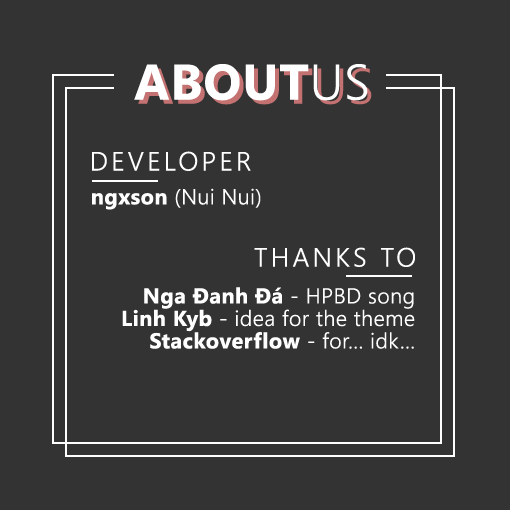
<style>
.page{position:relative;width:510px;height:510px;background:#333333}
.page>*{position:absolute;margin:0}
.t1{font:50px "SegoeUI-Bold";letter-spacing:0.02em;color:#ffffff}
.t2{font:50px "SegoeUI-Semilight";letter-spacing:0.02em;color:#ffffff}
.t3{font:50px "SegoeUI-Bold";letter-spacing:0.02em}
.t4{font:50px "SegoeUI-Semilight";letter-spacing:0.02em}
.t5{font:26.4px "SegoeUI-Semilight";letter-spacing:0.12em;color:#ffffff}
.t6{font:21.6px "SegoeUI-Semilight";letter-spacing:0.02em;color:#ffffff}
.t7{font:21.6px "SegoeUI-Bold";letter-spacing:0.02em;color:#ffffff}
.t8{font:26.5px "SegoeUI-Semilight";letter-spacing:0.12em;color:#ffffff}
.t9{font:21.7px/22.5px "SegoeUI-Semilight";letter-spacing:0.02em;color:#ffffff}
.t10{font:21.7px/22.5px "SegoeUI-Bold";letter-spacing:0.02em;color:#ffffff}
</style>
<div class="page">
<p class="t1" style="left:134px;top:64px;width:234px;height:37px">ABOUT<span class="t2">US</span></p>
<p class="t3" style="left:138px;top:68px;width:234px;height:37px">ABOUT<span class="t4">US</span></p>
<p class="t5" style="left:92px;top:151px;width:159px;height:20px">DEVELOPER</p>
<p class="t6" style="left:92px;top:188px;width:169px;height:22px"><span class="t7">ngxson </span>(Nui Nui)</p>
<p class="t8" style="left:254px;top:247px;width:161px;height:20px">THANKS TO</p>
<p class="t9" style="left:122px;top:287px;width:293px;height:62px;text-align:right"><span class="t10">Nga Đanh Đá </span>- HPBD song<br><span class="t10">Linh Kyb </span>- idea for the theme<br><span class="t10">Stackoverflow </span>- for... idk...</p>
</div>
